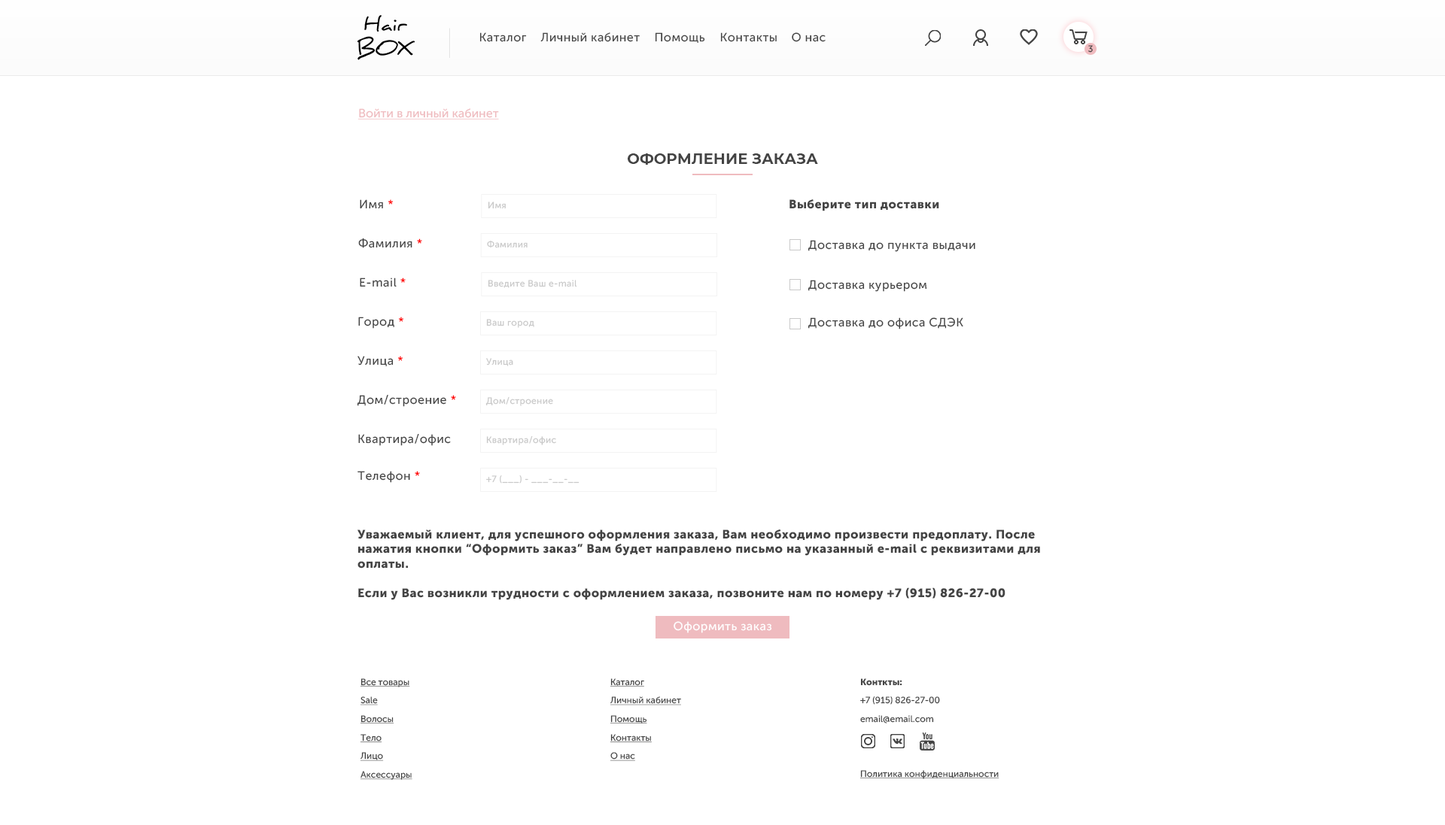
<style>
.page{position:relative;width:1445px;height:825px;background:#ffffff}
.page>*{position:absolute;margin:0}
.t1{font:12px "MuseoSansCyrl-500";letter-spacing:0.03em;color:#444444}
.t2{font:9px "MuseoSansCyrl-500";letter-spacing:0.03em;color:#444444}
.t3{font:12px "MuseoSansCyrl-500";color:#efbbbf;text-decoration:underline}
.t4{font:14.9px "Montserrat-Bold";color:#444444;text-transform:uppercase}
.t5{font:12px "MuseoSansCyrl-500";letter-spacing:0.03em;color:#ff0000}
.t6{font:9px "MuseoSansCyrl-500";letter-spacing:0.03em;color:#c9c9c9}
.t7{font:12px "MuseoSansCyrl-900";letter-spacing:0.03em;color:#444444}
.t8{font:12.2px "MuseoSansCyrl-900";letter-spacing:0.03em;color:#444444}
.t9{font:12px "MuseoSansCyrl-500";letter-spacing:0.03em;color:#ffffff}
.t10{font:9px/18.6px "MuseoSansCyrl-500";color:#444444;text-decoration:underline}
.t11{font:9px/18.6px "MuseoSansCyrl-500";color:#444444}
.t12{font:9px/18.6px "MuseoSansCyrl-900";color:#444444}
.t13{font:9px "MuseoSansCyrl-500";color:#444444;text-decoration:underline}
</style>
<div class="page">
<p class="t1" style="left:479px;top:32px;width:48px;height:10px">Каталог</p>
<p class="t1" style="left:540px;top:32px;width:100px;height:10px">Личный кабинет</p>
<p class="t1" style="left:655px;top:32px;width:50px;height:11px">Помощь</p>
<p class="t1" style="left:720px;top:32px;width:57px;height:10px">Контакты</p>
<p class="t1" style="left:792px;top:32px;width:33px;height:10px">О нас</p>
<p class="t2" style="left:1088px;top:45px;width:5px;height:8px">3</p>
<p class="t3" style="left:357px;top:108px;width:142px;height:12px">Войти в личный кабинет</p>
<p class="t4" style="left:628px;top:153px;width:190px;height:12px">оформление заказа</p>
<p class="t1" style="left:360px;top:199px;width:33px;height:10px">Имя <span class="t5">*</span></p>
<p class="t6" style="left:488px;top:202px;width:18px;height:7px">Имя</p>
<p class="t7" style="left:789px;top:199px;width:150px;height:12px">Выберите тип доставки</p>
<p class="t1" style="left:358px;top:238px;width:64px;height:10px">Фамилия <span class="t5">*</span></p>
<p class="t6" style="left:487px;top:240px;width:40px;height:8px">Фамилия</p>
<p class="t1" style="left:808px;top:240px;width:167px;height:12px">Доставка до пункта выдачи</p>
<p class="t1" style="left:360px;top:278px;width:46px;height:9px">E-mail <span class="t5">*</span></p>
<p class="t6" style="left:488px;top:280px;width:89px;height:8px">Введите Ваш е-mail</p>
<p class="t1" style="left:808px;top:280px;width:119px;height:12px">Доставка курьером</p>
<p class="t1" style="left:358px;top:317px;width:45px;height:12px">Город <span class="t5">*</span></p>
<p class="t1" style="left:808px;top:318px;width:155px;height:12px">Доставка до офиса СДЭК</p>
<p class="t6" style="left:486px;top:319px;width:48px;height:9px">Ваш город</p>
<p class="t1" style="left:357px;top:356px;width:46px;height:10px">Улица <span class="t5">*</span></p>
<p class="t6" style="left:486px;top:358px;width:27px;height:8px">Улица</p>
<p class="t1" style="left:357px;top:395px;width:99px;height:12px">Дом/строение <span class="t5">*</span></p>
<p class="t6" style="left:485px;top:397px;width:68px;height:9px">Дом/строение</p>
<p class="t1" style="left:358px;top:434px;width:93px;height:12px">Квартира/офис</p>
<p class="t6" style="left:486px;top:436px;width:70px;height:9px">Квартира/офис</p>
<p class="t1" style="left:357px;top:471px;width:63px;height:12px">Телефон <span class="t5">*</span></p>
<p class="t6" style="left:486px;top:476px;width:93px;height:8px">+7 (___) - ___-__-__</p>
<p class="t8" style="left:357px;top:529px;width:683px;height:71px">Уважаемый клиент, для успешного оформления заказа, Вам необходимо произвести предоплату. После нажатия кнопки “Оформить заказ” Вам будет направлено письмо на указанный e-mail с реквизитами для оплаты.<br><br>Если у Вас возникли трудности с оформлением заказа, позвоните нам по номеру +7 (915) 826-27-00</p>
<p class="t9" style="left:673px;top:622px;width:99px;height:12px">Оформить заказ</p>
<p class="t10" style="left:360px;top:679px;width:52px;height:101px">Все товары<br>Sale<br>Волосы<br>Тело<br>Лицо<br>Аксессуары</p>
<p class="t10" style="left:609px;top:679px;width:72px;height:82px">Каталог<br>Личный кабинет<br>Помощь<br>Контакты<br>О нас</p>
<p class="t11" style="left:860px;top:679px;width:80px;height:45px"><span class="t12">Конткты:<br></span>+7 (915) 826-27-00<br>email@email.com</p>
<p class="t13" style="left:859px;top:770px;width:140px;height:10px">Политика конфиденциальности</p>
</div>
